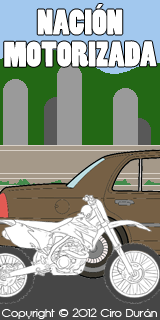
<style>
.page{position:relative;width:160px;height:320px}
.page>*{position:absolute;margin:0}
.t1{font:33px/32px "PoplarStd";color:#ffffff}
.t2{font:12px "Opificio";color:#ffffff}
</style>
<div class="page">
<p class="t1" style="left:4px;top:4px;width:153px;height:63px;text-align:center">NACIÓN<br>MOTORIZADA</p>
<p class="t2" style="left:2px;top:308px;width:155px;height:11px">Copyright © 2012 Ciro Durán</p>
</div>
